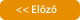
<style>
.page{position:relative;width:80px;height:20px;background:#e68d00}
.page>*{position:absolute;margin:0}
.t1{font:11px "MyriadPro-Semibold";color:#ffffff}
</style>
<div class="page">
<p class="t1" style="left:16px;top:5px;width:41px;height:8px">&lt;&lt; Előző</p>
</div>
